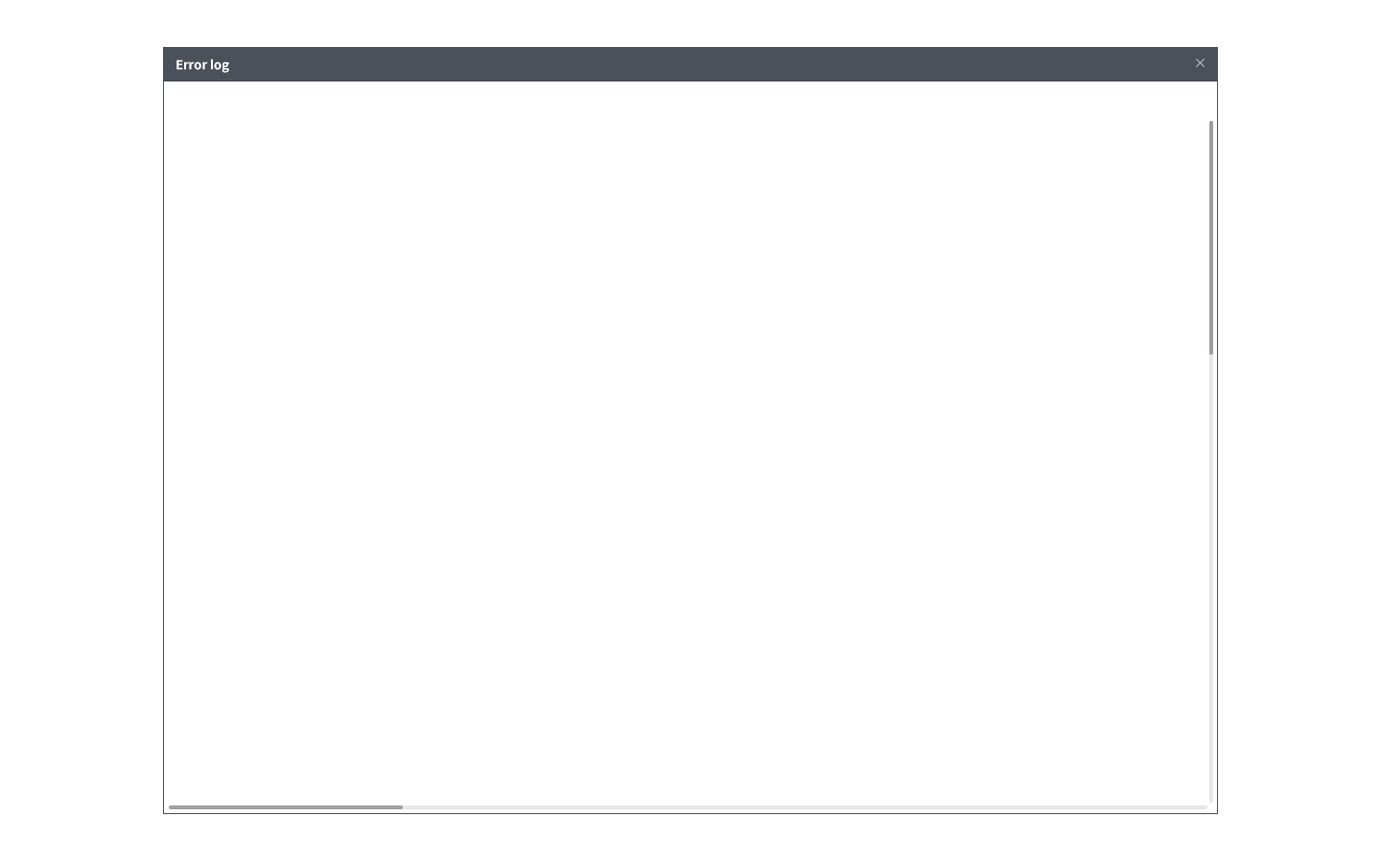
<style>
.page{position:relative;width:1381px;height:863px;background:#ffffff}
.page>*{position:absolute;margin:0}
.t1{font:12.5px "SpoqaHanSans-Bold";color:#ffffff}
</style>
<div class="page">
<p class="t1" style="left:176px;top:59px;width:53px;height:14px">Error log</p>
</div>
